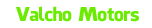
<style>
.page{position:relative;width:152px;height:28px;background:#ffffff}
.page>*{position:absolute;margin:0}
.t1{font:18.7px "FacebookLetterFaces";letter-spacing:-0.025em;color:#6aeb01}
</style>
<div class="page">
<p class="t1" style="left:16px;top:6px;width:123px;height:16px">Valcho Motors</p>
</div>
